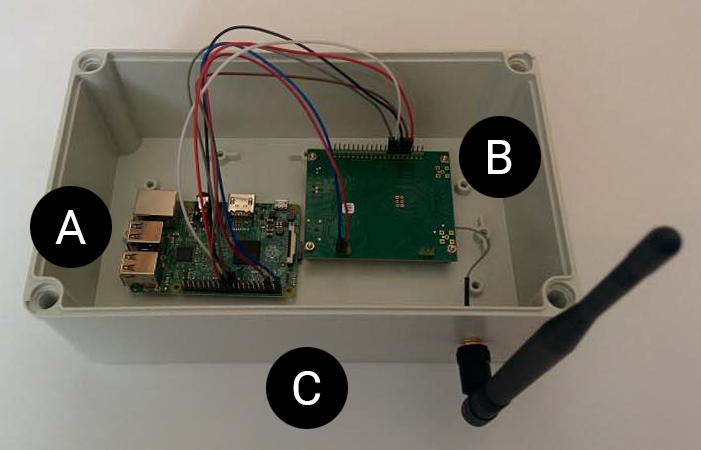
<style>
.page{position:relative;width:701px;height:450px}
.page>*{position:absolute;margin:0}
.t1{font:48px "Roboto-Regular";color:#ffffff}
</style>
<div class="page">
<p class="t1" style="left:488px;top:140px;width:24px;height:34px">B</p>
<p class="t1" style="left:55px;top:210px;width:31px;height:34px">A</p>
<p class="t1" style="left:293px;top:371px;width:28px;height:34px">C</p>
</div>
